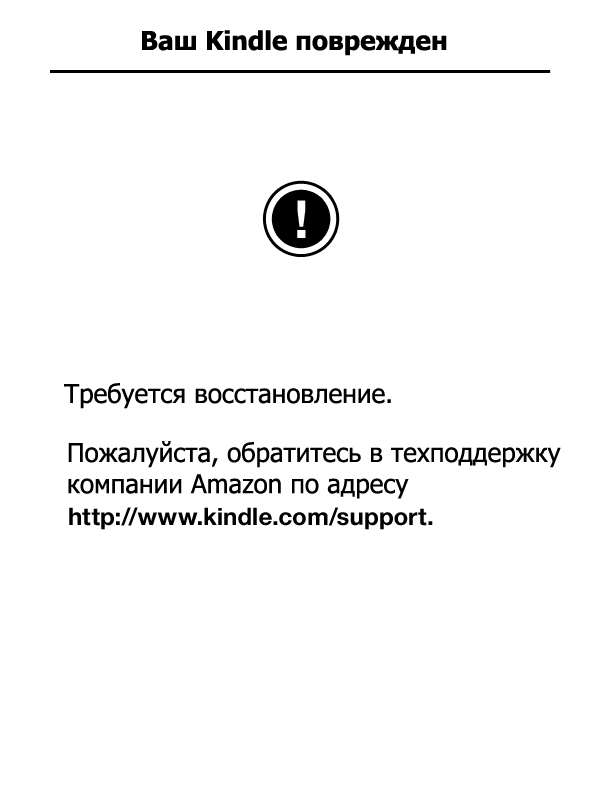
<style>
.page{position:relative;width:600px;height:800px;background:#ffffff}
.page>*{position:absolute;margin:0}
.t1{font:26px "Tahoma-Bold";color:#000000}
.t2{font:26px "Tahoma";color:#000000}
</style>
<div class="page">
<p class="t1" style="left:142px;top:30px;width:305px;height:26px">Ваш Kindle поврежден</p>
<p class="t2" style="left:64px;top:383px;width:327px;height:26px">Требуется восстановление.</p>
<p class="t2" style="left:68px;top:441px;width:493px;height:58px">Пожалуйста, обратитесь в техподдержку<br>компании Amazon по адресу</p>
</div>
